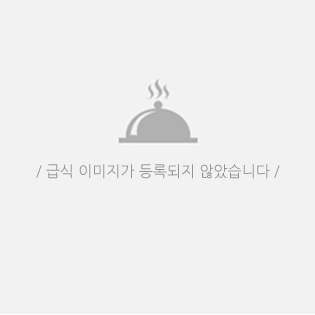
<style>
.page{position:relative;width:315px;height:315px;background:#f2f2f2}
.page>*{position:absolute;margin:0}
.t1{font:15px "NanumGothic";color:#949494}
</style>
<div class="page">
<p class="t1" style="left:36px;top:164px;width:244px;height:15px">/ 급식 이미지가 등록되지 않았습니다 /</p>
</div>
